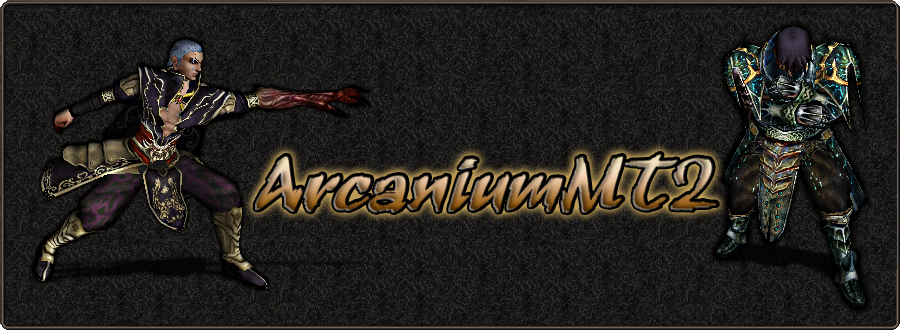
<style>
.page{position:relative;width:900px;height:330px}
.page>*{position:absolute;margin:0}
.t1{font:77.3px "RuachLetPlain";font-weight:bold}
</style>
<div class="page">
<p class="t1" style="left:255px;top:154px;width:462px;height:59px">ArcaniumMT2</p>
</div>
